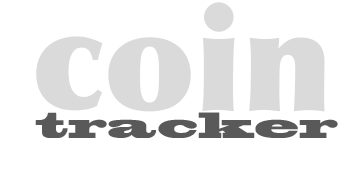
<style>
.page{position:relative;width:363px;height:191px;background:#ffffff}
.page>*{position:absolute;margin:0}
.t1{font:140px "Optima-ExtraBlack";color:#dadada}
.t2{font:34px "BlackoakStd";color:#595959}
</style>
<div class="page">
<p class="t1" style="left:36px;top:2px;width:289px;height:110px">coin</p>
<p class="t2" style="left:35px;top:112px;width:303px;height:26px">tracker</p>
</div>
